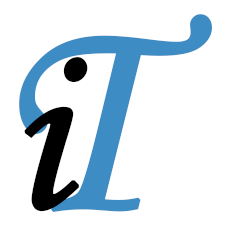
<style>
.page{position:relative;width:228px;height:228px;background:#ffffff}
.page>*{position:absolute;margin:0}
.t1{font:290.3px "STLiti";color:#3d8cc3;font-weight:bold}
.t2{font:236.9px "STLiti";color:#000000;font-weight:bold}
</style>
<div class="page">
<p class="t1" style="left:19px;top:14px;width:193px;height:198px">T</p>
<p class="t2" style="left:24px;top:57px;width:64px;height:155px">i</p>
</div>
